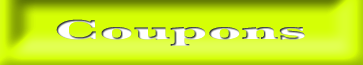
<style>
.page{position:relative;width:363px;height:65px}
.page>*{position:absolute;margin:0}
.t1{font:28.4px "Baskerville-Bold";scale:2.13 1}
</style>
<div class="page">
<p class="t1" style="left:56px;top:19px;width:249px;height:27px">Coupons</p>
</div>
